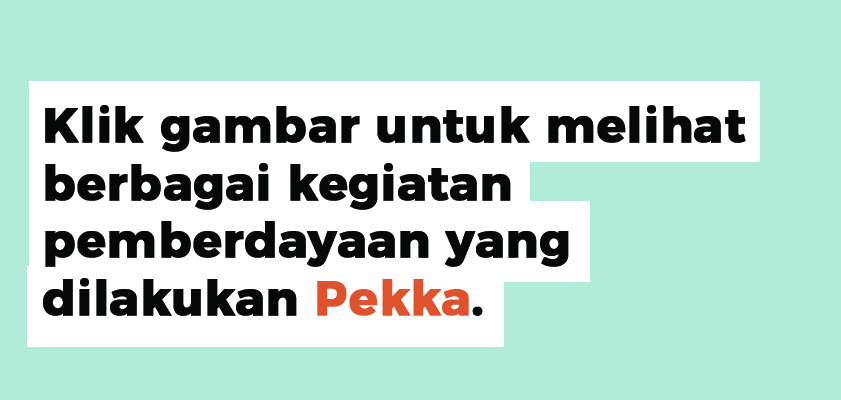
<style>
.page{position:relative;width:841px;height:400px;background:#b1ecd9}
.page>*{position:absolute;margin:0}
.t1{font:48px "Montserrat-Bold";color:#060808;font-weight:bold}
.t2{font:48px "Montserrat-Bold";color:#de522e;font-weight:bold}
</style>
<div class="page">
<p class="t1" style="left:43px;top:105px;width:703px;height:211px">Klik gambar untuk melihat berbagai kegiatan<br>pemberdayaan yang <br>dilakukan <span class="t2">Pekka</span>.</p>
</div>
